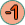
<style>
.page{position:relative;width:25px;height:25px;background:#f5a98b}
.page>*{position:absolute;margin:0}
.t1{font:10px "Orbitron-Regular";color:#ec5317;font-weight:bold}
.t2{font:18px "Orbitron-Regular";color:#ec5317;font-weight:bold}
</style>
<div class="page">
<p class="t1" style="left:6px;top:5px;width:11px;height:14px">-<span class="t2">1</span></p>
</div>
